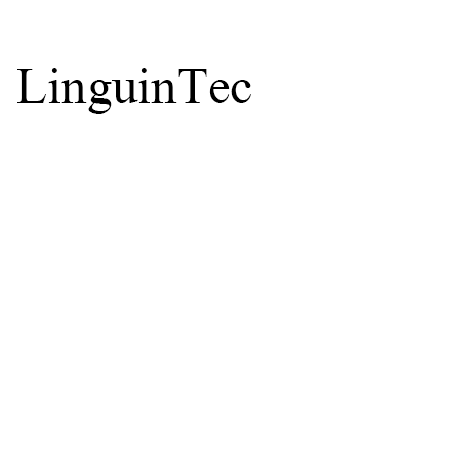
<style>
.page{position:relative;width:450px;height:450px;background:#ffffff}
.page>*{position:absolute;margin:0}
.t1{font:50.8px "MongolianBaiti";color:#000000}
</style>
<div class="page">
<p class="t1" style="left:17px;top:68px;width:234px;height:46px">LinguinTec</p>
</div>
